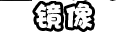
<style>
.page{position:relative;width:128px;height:32px;background:#ffffff}
.page>*{position:absolute;margin:0}
.t1{font:28px "DFPHaiBaoW12";letter-spacing:0.1em;color:#ffffff}
</style>
<div class="page">
<p class="t1" style="left:35px;top:3px;width:57px;height:27px">镜像</p>
</div>
